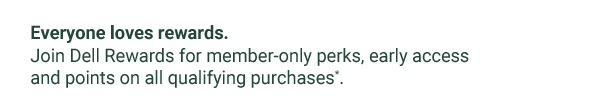
<style>
.page{position:relative;width:600px;height:112px;background:#ffffff}
.page>*{position:absolute;margin:0}
.t1{font:18.5px "Roboto-Regular";color:#244739}
.t2{font:18.5px "Roboto-Bold";color:#244739}
</style>
<div class="page">
<p class="t1" style="left:30px;top:25px;width:439px;height:63px"><span class="t2">Everyone loves rewards.<br></span>Join Dell Rewards for member-only perks, early access <br>and points on all qualifying purchases*.</p>
</div>
